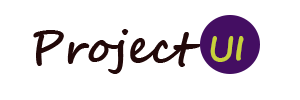
<style>
.page{position:relative;width:300px;height:100px;background:#ffffff}
.page>*{position:absolute;margin:0}
.t1{font:45px "SegoeScript-Bold";color:#220909}
.t2{font:34px "SegoeScript-Bold";color:#c8d139}
</style>
<div class="page">
<p class="t1" style="left:33px;top:29px;width:168px;height:45px">Project</p>
<p class="t2" style="left:210px;top:36px;width:34px;height:26px">UI</p>
</div>
